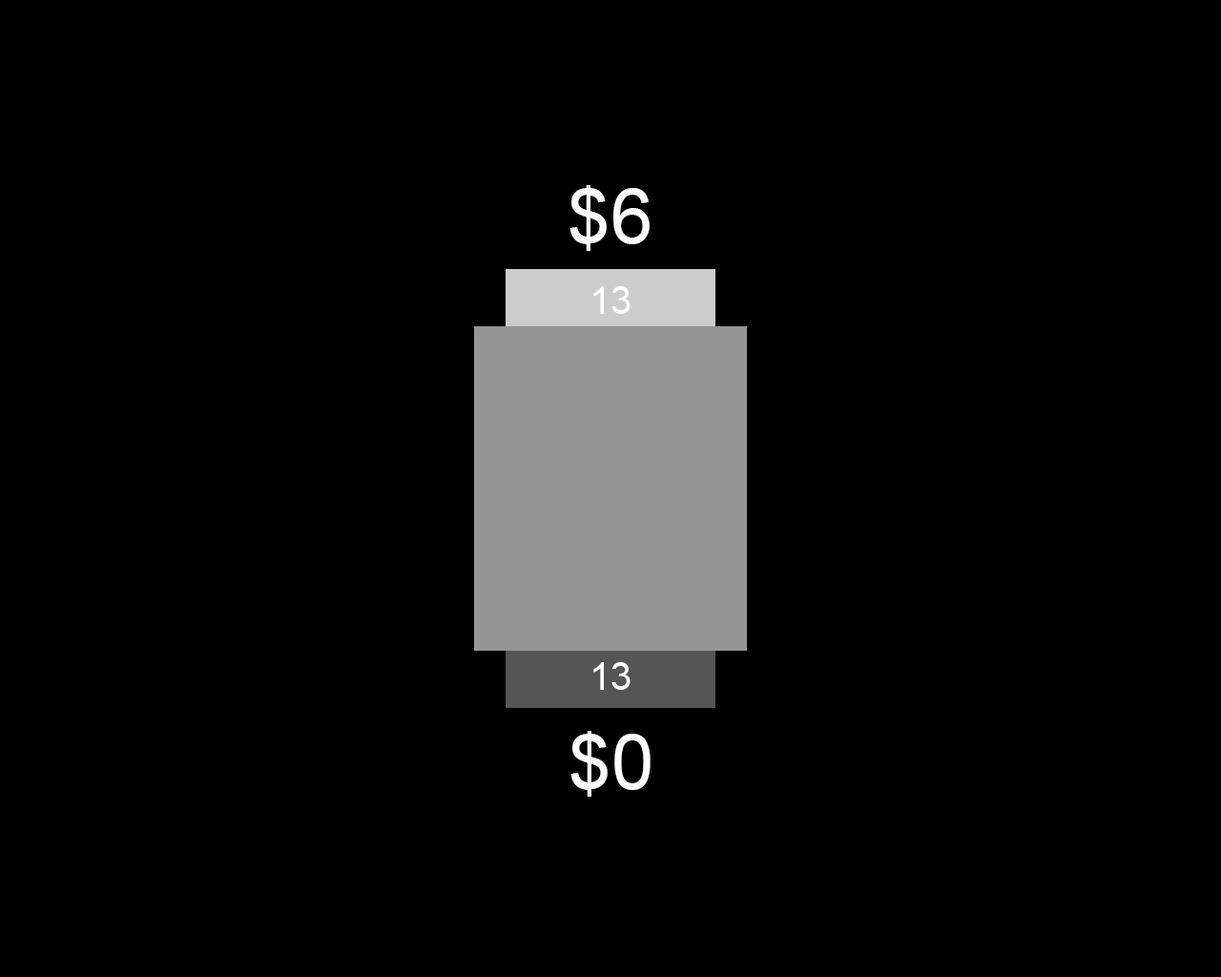
<style>
.page{position:relative;width:1221px;height:977px;background:#000000}
.page>*{position:absolute;margin:0}
.t1{font:76.3px "ArialMT";color:#fefefe}
.t2{font:38.2px "ArialMT";color:#fefefe}
</style>
<div class="page">
<p class="t1" style="left:569px;top:185px;width:81px;height:66px">$6</p>
<p class="t2" style="left:593px;top:286px;width:37px;height:28px">13</p>
<p class="t2" style="left:593px;top:662px;width:37px;height:28px">13</p>
<p class="t1" style="left:570px;top:731px;width:80px;height:65px">$0</p>
</div>
